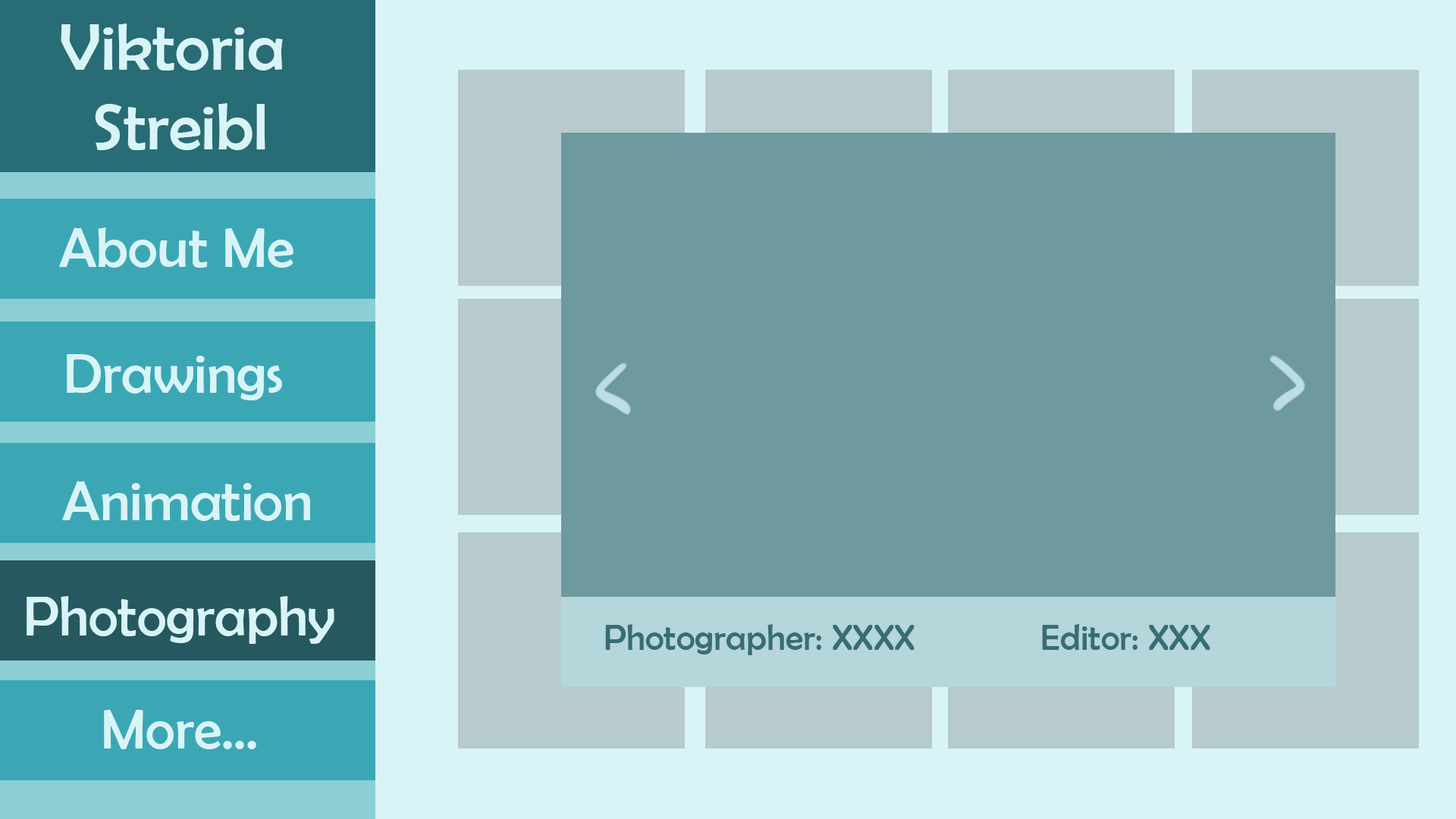
<style>
.page{position:relative;width:1456px;height:819px;background:#6e999e}
.page>*{position:absolute;margin:0}
.t1{font:66.3px "BerlinSansFB-Reg";color:#d9f4f7}
.t2{font:56.9px "BerlinSansFB-Reg";color:#d9f4f7}
.t3{font:36.4px "BerlinSansFB-Reg";color:#376e75}
</style>
<div class="page">
<p class="t1" style="left:61px;top:24px;width:222px;height:126px;text-align:center">Viktoria <br>Streibl</p>
<p class="t2" style="left:59px;top:227px;width:234px;height:41px">About Me</p>
<p class="t2" style="left:67px;top:354px;width:215px;height:46px">Drawings</p>
<p class="t2" style="left:62px;top:481px;width:248px;height:40px">Animation</p>
<p class="t2" style="left:27px;top:596px;width:307px;height:48px">Photography</p>
<p class="t3" style="left:605px;top:624px;width:605px;height:31px">Photographer: XXXX        Editor: XXX</p>
<p class="t2" style="left:104px;top:710px;width:152px;height:39px">More...</p>
</div>
